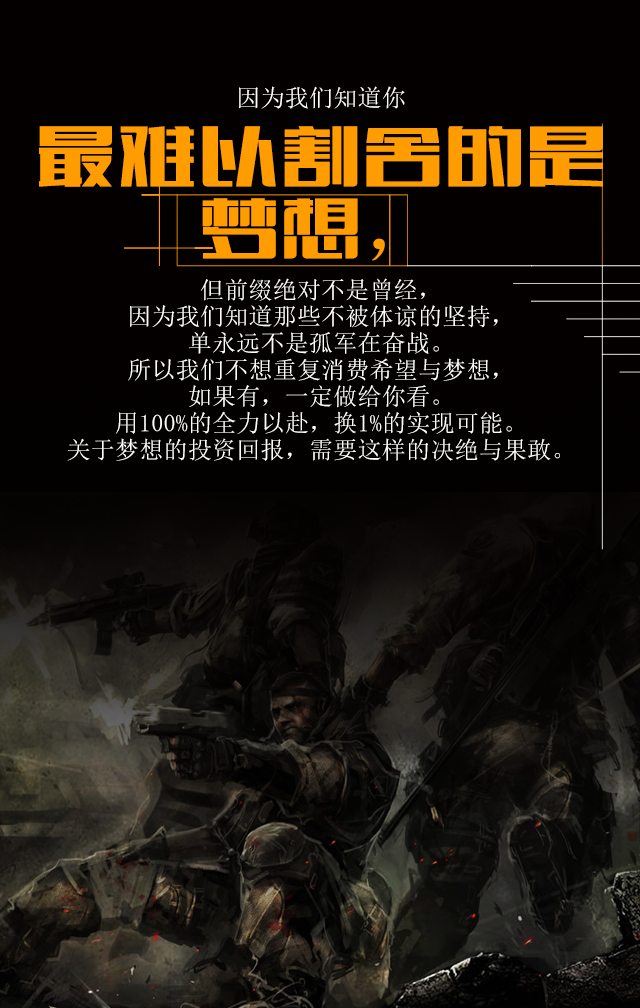
<style>
.page{position:relative;width:640px;height:1008px;background:#030000}
.page>*{position:absolute;margin:0}
.t1{font:24px/26.7px "SimSun";letter-spacing:0.01em;color:#ffffff}
.t2{font:24px/30px "SimSun";letter-spacing:0.01em;color:#ffffff}
.t3{font:81px/72px "FZCTHJW--GB1-0";letter-spacing:0.01em;color:#ff9c00}
.t4{font:81px/90px "FZCTHJW--GB1-0";letter-spacing:0.01em;color:#ff9c00}
.t5{font:81px/72px "SimSun";letter-spacing:0.01em;color:#ff9c00}
.t6{font:24px/26.7px "SimSun";letter-spacing:0.01em;color:#fffcfc}
.t7{font:24px/64px "SimSun";letter-spacing:0.01em;color:#fffcfc}
</style>
<div class="page">
<p class="t1" style="left:39px;top:86px;width:564px;height:375px;text-align:center"><span class="t2">因为我们知道你<br></span><span class="t3">最难以割舍的是</span><span class="t4">梦想</span><span class="t5">，<br></span>但前缀绝对不是曾经，<br>因为我们知道那些不被体谅的坚持，<br>单永远不是孤军在奋战。<br>所以我们不想重复消费希望与梦想，<br>如果有，一定做给你看。<br><span class="t6">用100%的全力以赴，换1%的实现可能。<br></span><span class="t7">关于梦想的投资回报，需要这样的决绝与果敢。</span></p>
</div>
